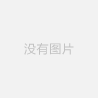
<style>
.page{position:relative;width:98px;height:98px;background:#f2f2f2}
.page>*{position:absolute;margin:0}
.t1{font:12px "MicrosoftYaHei";letter-spacing:0.05em;color:#c2c2c2}
</style>
<div class="page">
<p class="t1" style="left:24px;top:43px;width:50px;height:12px">没有图片</p>
</div>
